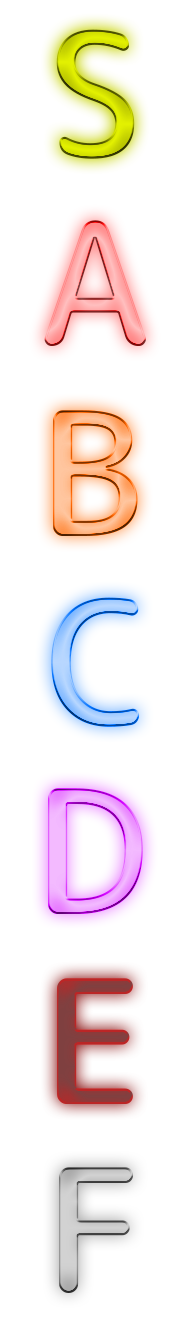
<style>
.page{position:relative;width:189px;height:1323px;background:#ffffff}
.page>*{position:absolute;margin:0}
.t1{font:172px "rounded-mgenplus-2cp-medium";color:#d3e001}
.t2{font:172px "rounded-mgenplus-2cp-medium"}
.t3{font:172px "rounded-mgenplus-2cp-medium";color:#a4ccff}
.t4{font:172px "rounded-mgenplus-2cp-medium";color:#f0a9ff}
.t5{font:172px "rounded-mgenplus-2cp-medium";color:#883c3c}
.t6{font:172px "rounded-mgenplus-2cp-medium";color:#cacaca}
</style>
<div class="page">
<p class="t1" style="left:56px;top:29px;width:79px;height:130px">S</p>
<p class="t2" style="left:44px;top:220px;width:102px;height:126px">A</p>
<p class="t2" style="left:53px;top:410px;width:85px;height:126px">B</p>
<p class="t3" style="left:51px;top:597px;width:89px;height:130px">C</p>
<p class="t4" style="left:48px;top:788px;width:95px;height:126px">D</p>
<p class="t5" style="left:57px;top:978px;width:76px;height:126px">E</p>
<p class="t6" style="left:59px;top:1167px;width:75px;height:126px">F</p>
</div>
